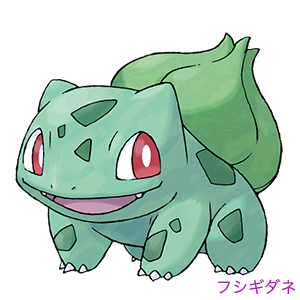
<style>
.page{position:relative;width:300px;height:300px;background:#ffffff}
.page>*{position:absolute;margin:0}
.t1{font:16px "HiraKakuProN-W3";color:#a529ad}
</style>
<div class="page">
<p class="t1" style="left:218px;top:278px;width:78px;height:16px">フシギダネ</p>
</div>
